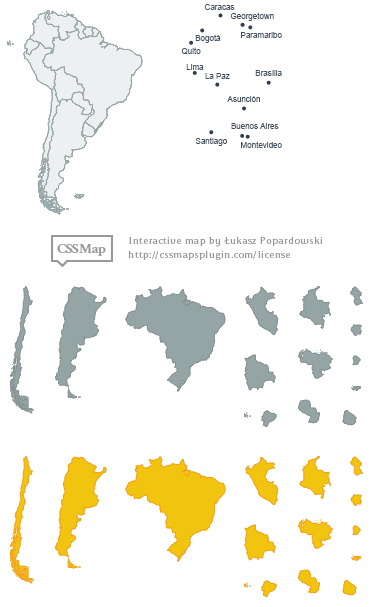
<style>
.page{position:relative;width:373px;height:607px;background:#ffffff}
.page>*{position:absolute;margin:0}
.t1{font:8px "ArialMT";color:#2c3e50}
</style>
<div class="page">
<p class="t1" style="left:204px;top:4px;width:31px;height:6px">Caracas</p>
<p class="t1" style="left:230px;top:12px;width:44px;height:9px">Georgetown</p>
<p class="t1" style="left:195px;top:34px;width:26px;height:9px">Bogotá</p>
<p class="t1" style="left:241px;top:32px;width:41px;height:6px">Paramaribo</p>
<p class="t1" style="left:181px;top:47px;width:20px;height:8px">Quito</p>
<p class="t1" style="left:186px;top:64px;width:18px;height:6px">Lima</p>
<p class="t1" style="left:205px;top:73px;width:25px;height:6px">La Paz</p>
<p class="t1" style="left:255px;top:70px;width:27px;height:6px">Brasília</p>
<p class="t1" style="left:227px;top:96px;width:33px;height:6px">Asunción</p>
<p class="t1" style="left:231px;top:123px;width:48px;height:6px">Buenos Aires</p>
<p class="t1" style="left:195px;top:137px;width:32px;height:9px">Santiago</p>
<p class="t1" style="left:241px;top:141px;width:41px;height:7px">Montevideo</p>
</div>
